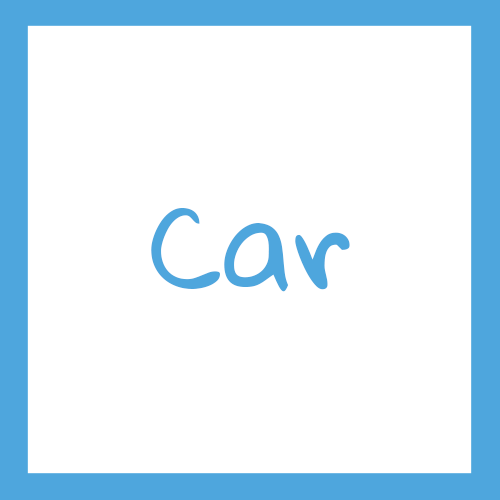
<style>
.page{position:relative;width:500px;height:500px;background:#ffffff}
.page>*{position:absolute;margin:0}
.t1{font:117px "GloriaHallelujah";color:#4ea6dd}
</style>
<div class="page">
<p class="t1" style="left:151px;top:208px;width:199px;height:84px">Car</p>
</div>
